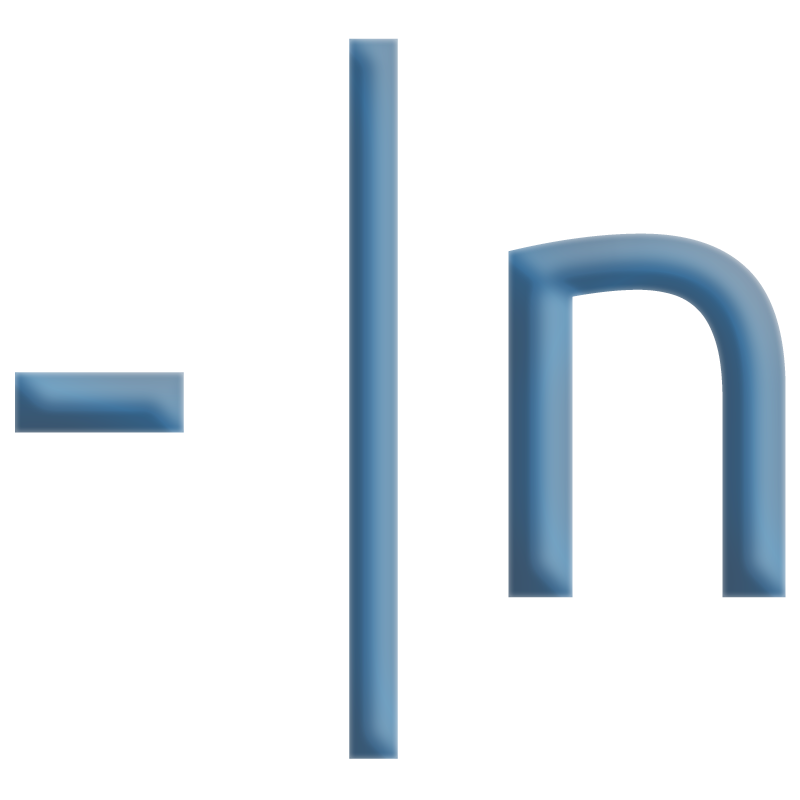
<style>
.page{position:relative;width:800px;height:800px;background:#ffffff}
.page>*{position:absolute;margin:0}
.t1{font:766.7px "UbuntuMonoDerivativePowerline-Regular"}
.t2{font:766.7px "ArialNarrow"}
</style>
<div class="page">
<p class="t1" style="left:15px;top:38px;width:771px;height:721px">-<span class="t2">|</span>n</p>
</div>
